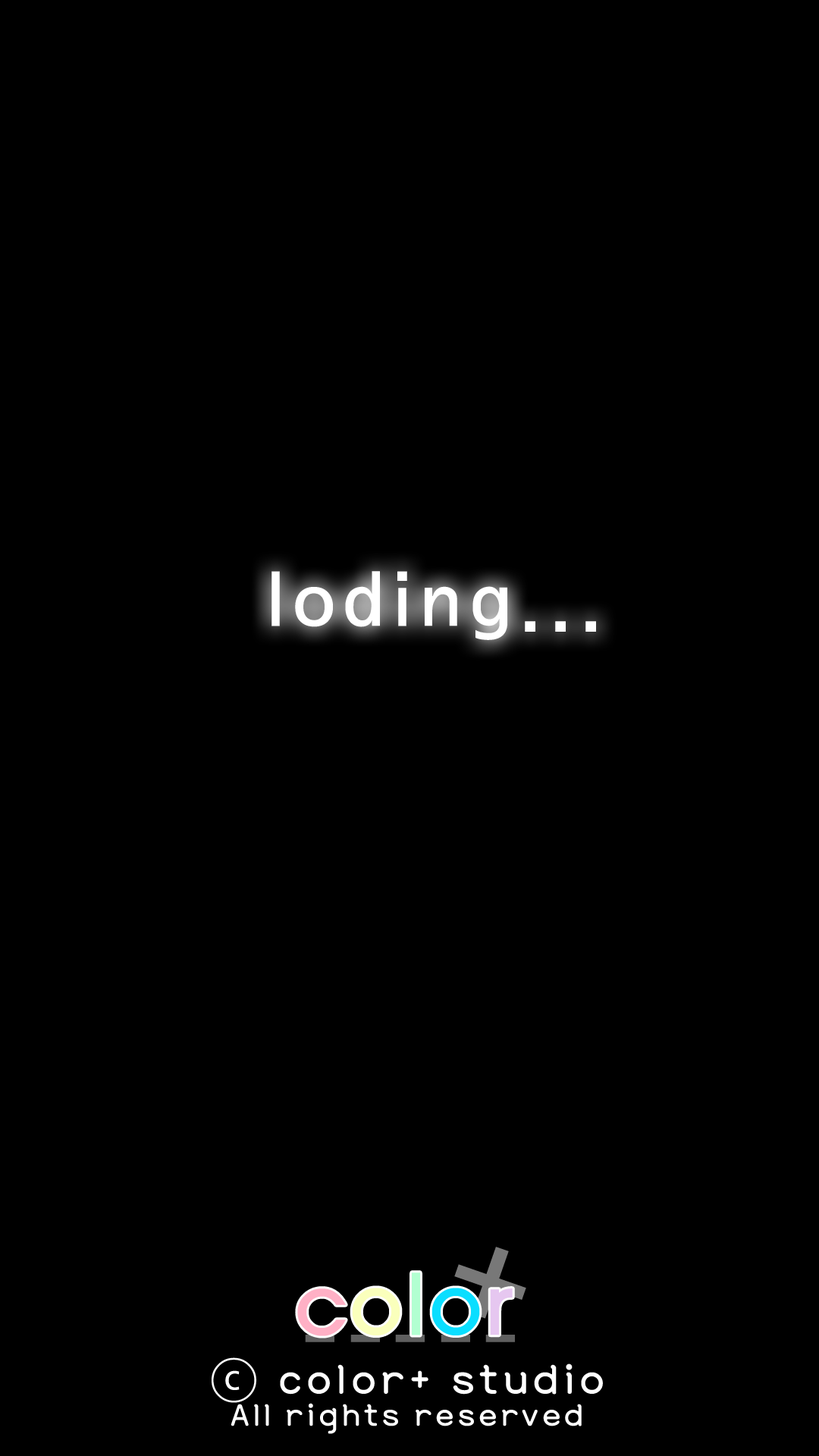
<style>
.page{position:relative;width:819px;height:1456px;background:#000000}
.page>*{position:absolute;margin:0}
.t1{font:75.8px "SeoulNamsanEB";letter-spacing:0.1em;color:#ffffff}
.t2{font:37.9px/42.1px "YanoljaYacheR";letter-spacing:0.1em;color:#ffffff}
.t3{font:50.6px/42.1px "YanoljaYacheR";letter-spacing:0.1em;color:#ffffff}
</style>
<div class="page">
<p class="t1" style="left:271px;top:571px;width:325px;height:69px">loding...</p>
<p class="t2" style="left:212px;top:1357px;width:391px;height:77px;text-align:center"><span class="t3">ⓒ color+ studio<br></span>All rights reserved</p>
</div>
